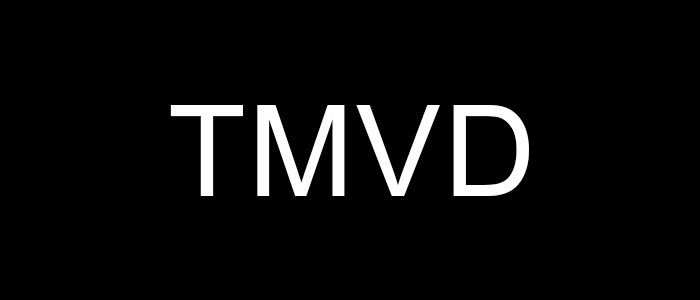
<style>
.page{position:relative;width:700px;height:300px;background:#000000}
.page>*{position:absolute;margin:0}
.t1{font:127px "ArialMT";letter-spacing:0.02em;color:#ffffff}
</style>
<div class="page">
<p class="t1" style="left:170px;top:105px;width:359px;height:91px">TMVD</p>
</div>
